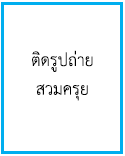
<style>
.page{position:relative;width:125px;height:156px;background:#ffffff}
.page>*{position:absolute;margin:0}
.t1{font:24px "THSarabunPSK";color:#000000}
</style>
<div class="page">
<p class="t1" style="left:32px;top:50px;width:61px;height:51px;text-align:center">ติดรูปถ่าย<br>สวมครุย</p>
</div>
